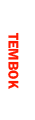
<style>
.page{position:relative;width:35px;height:120px;background:#ffffff}
.page>*{position:absolute;margin:0}
.t1{font:14.5px "FranklinGothic-Demi";color:#ff1901}
</style>
<div class="page">
<p class="t1" style="left:8px;top:32px;width:11px;height:57px;rotate:90deg">TEMBOK</p>
</div>
